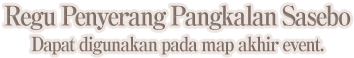
<style>
.page{position:relative;width:354px;height:58px;background:#ffffff}
.page>*{position:absolute;margin:0}
.t1{font:20px/32px "RyuminPro-ExBold";letter-spacing:-0.08em;color:#83726a;scale:0.9 1}
.t2{font:27px/32px "RyuminPro-ExBold";letter-spacing:-0.08em;color:#83726a;scale:0.9 1}
</style>
<div class="page">
<p class="t1" style="left:4px;top:5px;width:347px;height:50px;text-align:center"><span class="t2">Regu Penyerang Pangkalan Sasebo<br></span>Dapat digunakan pada map akhir event.</p>
</div>
